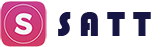
<style>
.page{position:relative;width:162px;height:47px;background:#ffffff}
.page>*{position:absolute;margin:0}
.t1{font:36px "Bauhaus93";letter-spacing:0.2em;color:#161544}
</style>
<div class="page">
<p class="t1" style="left:58px;top:12px;width:93px;height:24px">SATT</p>
</div>
